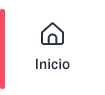
<style>
.page{position:relative;width:105px;height:95px;background:#ffffff}
.page>*{position:absolute;margin:0}
.t1{font:15.3px "FranklinGothic-Medium";color:#283044}
</style>
<div class="page">
<p class="t1" style="left:36px;top:58px;width:34px;height:12px">Inicio</p>
</div>
